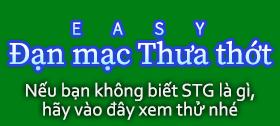
<style>
.page{position:relative;width:280px;height:126px;background:#007f15}
.page>*{position:absolute;margin:0}
.t1{font:31px "SourceSerifRoman-Regular"}
.t2{font:19px/19px "Corbel";color:#ffffff}
</style>
<div class="page">
<p class="t1" style="left:9px;top:40px;width:263px;height:31px">Đạn mạc Thưa thớt</p>
<p class="t2" style="left:26px;top:81px;width:229px;height:39px;text-align:center;opacity:0.9">Nếu bạn không biết STG là gì,<br>hãy vào đây xem thử nhé</p>
</div>
